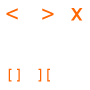
<style>
.page{position:relative;width:90px;height:90px;background:#ffffff}
.page>*{position:absolute;margin:0}
.t1{font:24px "ArialMT";letter-spacing:0.025em;color:#ff6500}
.t2{font:14px "ArialMT";letter-spacing:0.025em;color:#ff6500}
</style>
<div class="page">
<p class="t1" style="left:6px;top:8px;width:12px;height:12px">&lt;</p>
<p class="t1" style="left:42px;top:8px;width:12px;height:12px">&gt;</p>
<p class="t1" style="left:71px;top:8px;width:12px;height:13px">x</p>
<p class="t2" style="left:8px;top:68px;width:12px;height:14px">[ ]</p>
<p class="t2" style="left:38px;top:68px;width:12px;height:14px">] [</p>
</div>
